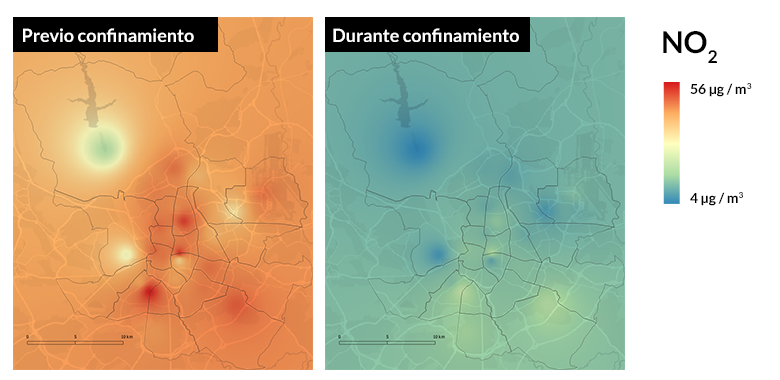
<style>
.page{position:relative;width:780px;height:380px;background:#ffffff}
.page>*{position:absolute;margin:0}
.t1{font:18px "Lato-Bold";color:#ffffff}
.t2{font:30px "Lato-Bold";color:#000000}
.t3{font:14px "Lato-Bold";color:#000000}
</style>
<div class="page">
<p class="t1" style="left:23px;top:28px;width:171px;height:14px">Previo confinamiento</p>
<p class="t1" style="left:333px;top:28px;width:186px;height:14px">Durante confinamiento</p>
<p class="t2" style="left:663px;top:31px;width:54px;height:32px">NO2</p>
<p class="t3" style="left:690px;top:83px;width:62px;height:14px">56 μg / m3</p>
<p class="t3" style="left:690px;top:192px;width:53px;height:14px">4 μg / m3</p>
</div>
